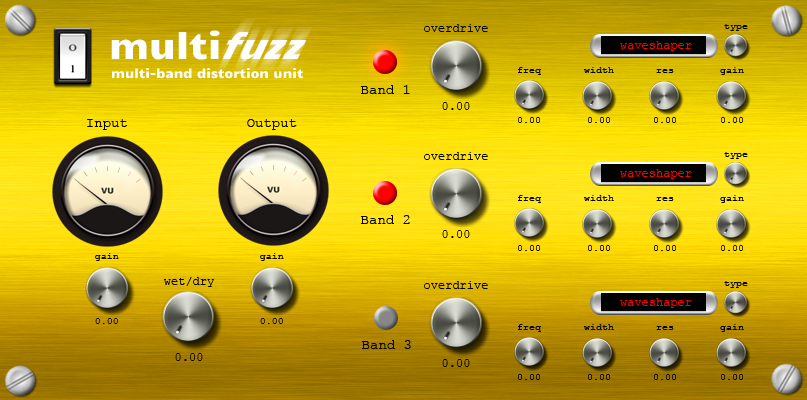
<style>
.page{position:relative;width:807px;height:400px}
.page>*{position:absolute;margin:0}
.t1{font:36px "Candal";color:#ffffff}
.t2{font:12px "CourierNewPSMT";color:#000000}
.t3{font:10px "CourierNewPSMT";color:#000000}
.t4{font:12px "CourierNewPSMT";color:#ff0000}
.t5{font:12.5px "Candal";color:#ffffff}
.t6{font:14px "CourierNewPSMT";color:#010101}
.t7{font:14px "CourierNewPSMT";color:#000000}
</style>
<div class="page">
<p class="t1" style="left:111px;top:30px;width:109px;height:30px">multi</p>
<p class="t2" style="left:424px;top:24px;width:64px;height:8px">overdrive</p>
<p class="t3" style="left:724px;top:24px;width:24px;height:7px">type</p>
<p class="t4" style="left:620px;top:41px;width:72px;height:10px">waveshaper</p>
<p class="t5" style="left:112px;top:68px;width:192px;height:11px">multi-band distortion unit</p>
<p class="t3" style="left:518px;top:67px;width:23px;height:8px">freq</p>
<p class="t3" style="left:584px;top:67px;width:30px;height:6px">width</p>
<p class="t3" style="left:656px;top:69px;width:18px;height:4px">res</p>
<p class="t3" style="left:720px;top:67px;width:24px;height:8px">gain</p>
<p class="t6" style="left:361px;top:85px;width:49px;height:9px">Band 1</p>
<p class="t2" style="left:442px;top:102px;width:28px;height:8px">0.00</p>
<p class="t7" style="left:87px;top:119px;width:40px;height:11px">Input</p>
<p class="t7" style="left:247px;top:119px;width:50px;height:11px">Output</p>
<p class="t3" style="left:518px;top:117px;width:22px;height:6px">0.00</p>
<p class="t3" style="left:588px;top:117px;width:22px;height:6px">0.00</p>
<p class="t3" style="left:654px;top:117px;width:22px;height:6px">0.00</p>
<p class="t3" style="left:721px;top:117px;width:22px;height:6px">0.00</p>
<p class="t2" style="left:424px;top:152px;width:64px;height:8px">overdrive</p>
<p class="t3" style="left:724px;top:152px;width:24px;height:7px">type</p>
<p class="t4" style="left:620px;top:169px;width:72px;height:10px">waveshaper</p>
<p class="t3" style="left:518px;top:195px;width:23px;height:8px">freq</p>
<p class="t3" style="left:584px;top:195px;width:30px;height:6px">width</p>
<p class="t3" style="left:656px;top:197px;width:18px;height:4px">res</p>
<p class="t3" style="left:720px;top:195px;width:24px;height:8px">gain</p>
<p class="t7" style="left:361px;top:215px;width:49px;height:9px">Band 2</p>
<p class="t2" style="left:442px;top:230px;width:28px;height:8px">0.00</p>
<p class="t3" style="left:518px;top:245px;width:22px;height:6px">0.00</p>
<p class="t3" style="left:588px;top:245px;width:22px;height:6px">0.00</p>
<p class="t3" style="left:654px;top:245px;width:22px;height:6px">0.00</p>
<p class="t3" style="left:721px;top:245px;width:22px;height:6px">0.00</p>
<p class="t3" style="left:95px;top:253px;width:24px;height:8px">gain</p>
<p class="t3" style="left:260px;top:253px;width:24px;height:8px">gain</p>
<p class="t2" style="left:424px;top:281px;width:64px;height:8px">overdrive</p>
<p class="t3" style="left:724px;top:281px;width:24px;height:7px">type</p>
<p class="t4" style="left:620px;top:298px;width:72px;height:10px">waveshaper</p>
<p class="t3" style="left:95px;top:318px;width:23px;height:6px">0.00</p>
<p class="t3" style="left:260px;top:318px;width:23px;height:6px">0.00</p>
<p class="t3" style="left:518px;top:324px;width:23px;height:8px">freq</p>
<p class="t3" style="left:584px;top:324px;width:30px;height:6px">width</p>
<p class="t3" style="left:656px;top:326px;width:18px;height:4px">res</p>
<p class="t3" style="left:720px;top:324px;width:24px;height:8px">gain</p>
<p class="t7" style="left:362px;top:340px;width:49px;height:9px">Band 3</p>
<p class="t2" style="left:442px;top:359px;width:28px;height:8px">0.00</p>
<p class="t3" style="left:518px;top:374px;width:22px;height:6px">0.00</p>
<p class="t3" style="left:588px;top:374px;width:22px;height:6px">0.00</p>
<p class="t3" style="left:654px;top:374px;width:22px;height:6px">0.00</p>
<p class="t3" style="left:721px;top:374px;width:22px;height:6px">0.00</p>
</div>
